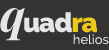
<style>
.page{position:relative;width:109px;height:50px;background:#333333}
.page>*{position:absolute;margin:0}
.t1{font:27px "Raleway-Black";letter-spacing:-0.04em;color:#e6e6e6}
.t2{font:45px "PlayfairDisplay-BoldItalic";letter-spacing:-0.04em;color:#e6e6e6}
.t3{font:27px "Raleway-Black";letter-spacing:-0.04em;color:#eec819}
.t4{font:13px "Raleway-Medium";color:#eaeaea}
</style>
<div class="page">
<p class="t1" style="left:0px;top:8px;width:97px;height:33px"><span class="t2">q</span>uad<span class="t3">ra</span></p>
<p class="t4" style="left:73px;top:34px;width:36px;height:11px">helios</p>
</div>
